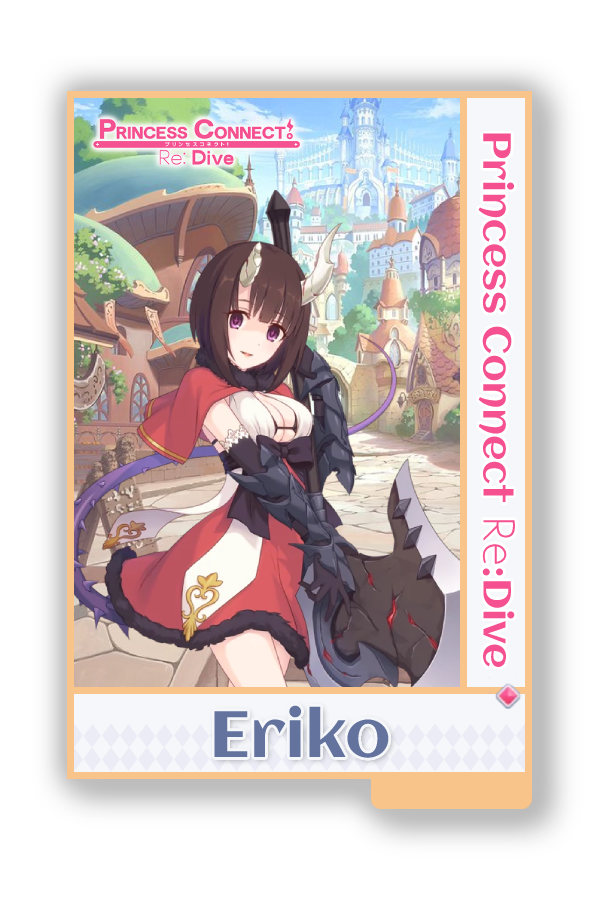
<style>
.page{position:relative;width:600px;height:900px;background:#ffffff}
.page>*{position:absolute;margin:0}
.t1{font:39px "Aclonica-Regular";color:#f55191}
.t2{font:39px "AaarghNormal";color:#f55191}
.t3{font:65px "Aclonica-Regular";color:#64739d}
</style>
<div class="page">
<p class="t1" style="left:478px;top:133px;width:38px;height:534px;rotate:90deg">Princess Connect <span class="t2">Re</span>:Dive</p>
<p class="t3" style="left:214px;top:705px;width:175px;height:53px">Eriko</p>
</div>
